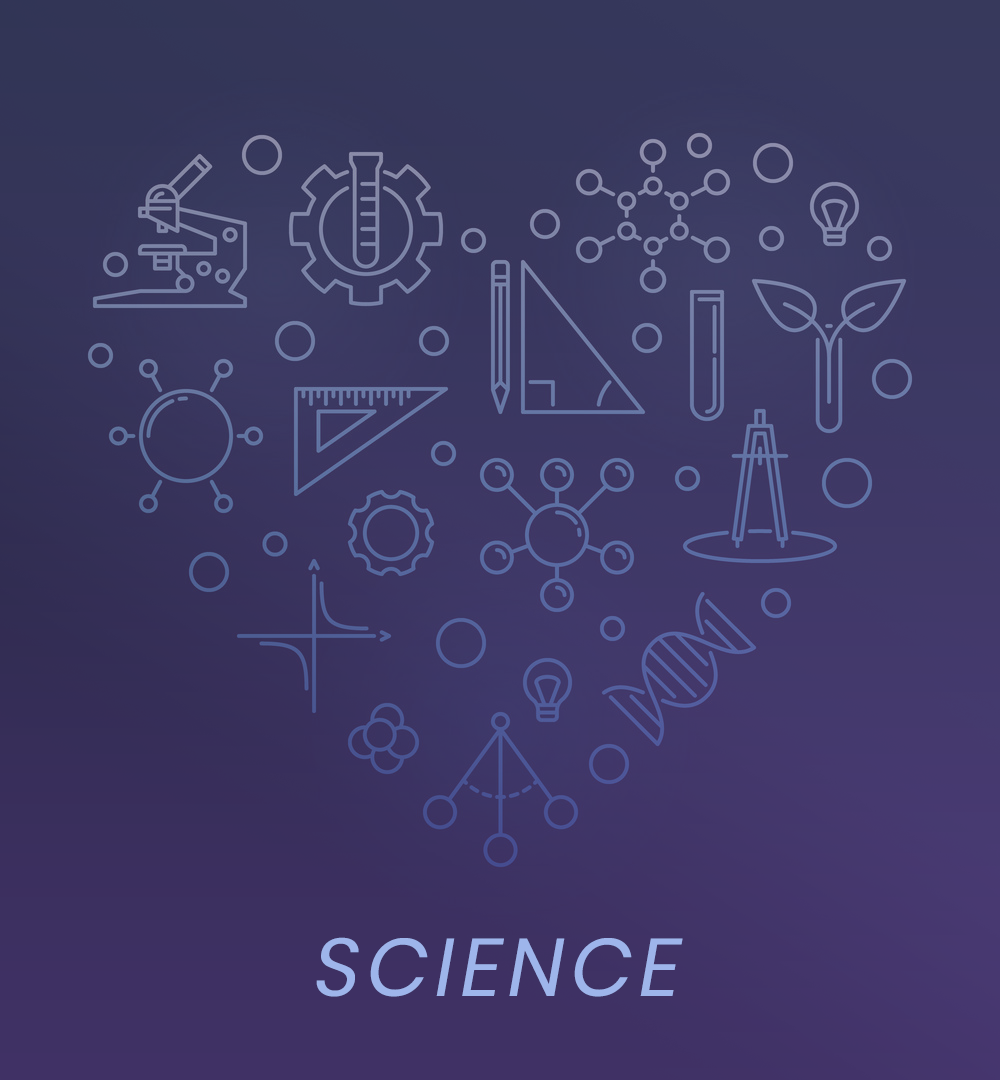
<style>
.page{position:relative;width:1000px;height:1080px}
.page>*{position:absolute;margin:0}
.t1{font:140px "Poppins-Regular";letter-spacing:0.075em;color:#9eb5eb;font-style:italic}
</style>
<div class="page">
<p class="t1" style="left:316px;top:937px;width:367px;height:60px">SCIENCE</p>
</div>
